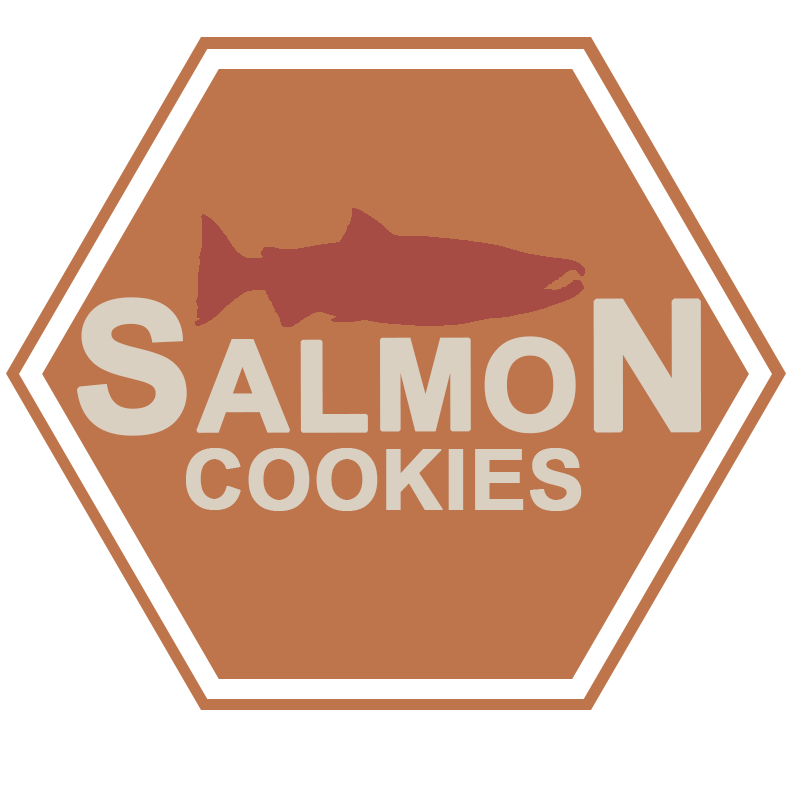
<style>
.page{position:relative;width:800px;height:800px;background:#ffffff}
.page>*{position:absolute;margin:0}
.t1{font:180px "Arial-BoldMT";color:#d9d0c1;font-variant:small-caps;font-weight:bold}
.t2{font:120px "Arial-BoldMT";color:#d9d0c1;font-variant:small-caps;font-weight:bold}
</style>
<div class="page">
<p class="t1" style="left:77px;top:297px;width:625px;height:139px">SalmoN</p>
<p class="t2" style="left:186px;top:448px;width:396px;height:63px">cookies</p>
</div>
